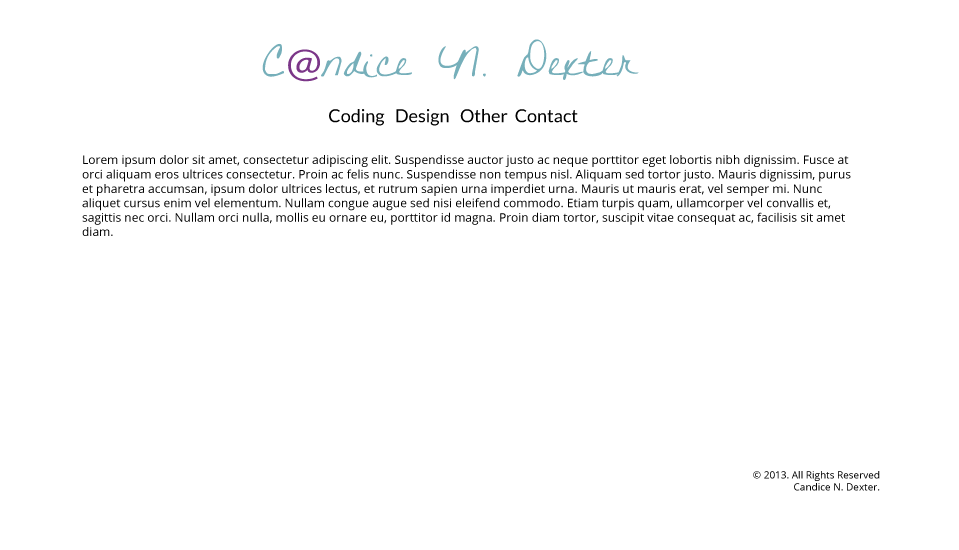
<style>
.page{position:relative;width:959px;height:550px;background:#ffffff}
.page>*{position:absolute;margin:0}
.t1{font:48px "WrittenonHisHands";color:#76afba;scale:1.08 1}
.t2{font:40px "Lato-Regular";color:#7b3688;scale:1.08 1}
.t3{font:18px "Lato-Regular";color:#000000}
.t4{font:12px "OpenSans";color:#000000}
.t5{font:10px "OpenSans";color:#000000}
</style>
<div class="page">
<p class="t1" style="left:262px;top:39px;width:377px;height:43px">C<span class="t2">@</span>ndice N. Dexter</p>
<p class="t3" style="left:329px;top:109px;width:249px;height:17px">Coding   Design   Other  Contact</p>
<p class="t4" style="left:82px;top:155px;width:769px;height:81px">Lorem ipsum dolor sit amet, consectetur adipiscing elit. Suspendisse auctor justo ac neque porttitor eget lobortis nibh dignissim. Fusce at orci aliquam eros ultrices consectetur. Proin ac felis nunc. Suspendisse non tempus nisl. Aliquam sed tortor justo. Mauris dignissim, purus et pharetra accumsan, ipsum dolor ultrices lectus, et rutrum sapien urna imperdiet urna. Mauris ut mauris erat, vel semper mi. Nunc aliquet cursus enim vel elementum. Nullam congue augue sed nisi eleifend commodo. Etiam turpis quam, ullamcorper vel convallis et, sagittis nec orci. Nullam orci nulla, mollis eu ornare eu, porttitor id magna. Proin diam tortor, suscipit vitae consequat ac, facilisis sit amet diam.</p>
<p class="t5" style="left:753px;top:471px;width:127px;height:20px;text-align:right">© 2013. All Rights Reserved<br>Candice N. Dexter.</p>
</div>
